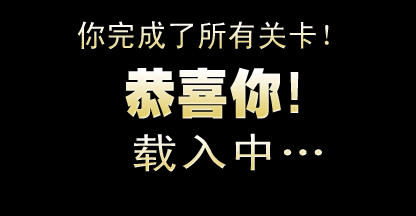
<style>
.page{position:relative;width:416px;height:216px;background:#000000}
.page>*{position:absolute;margin:0}
.t1{font:30.2px "SimHei";text-transform:uppercase}
.t2{font:53px "HeitiEG-Ultra-GB";text-transform:uppercase}
.t3{font:40.9px "SimHei";letter-spacing:0.03em;scale:1.18 1}
</style>
<div class="page">
<p class="t1" style="left:77px;top:21px;width:252px;height:29px">你完成了所有关卡！</p>
<p class="t2" style="left:125px;top:67px;width:174px;height:52px">恭喜你！</p>
<p class="t3" style="left:133px;top:133px;width:189px;height:39px">载入中…</p>
</div>
